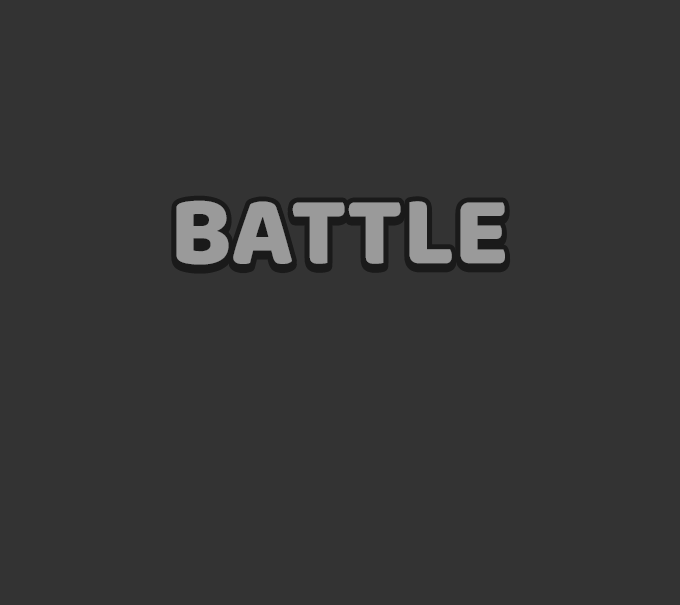
<style>
.page{position:relative;width:680px;height:605px;background:#333333}
.page>*{position:absolute;margin:0}
.t1{font:100px "Baloo2-ExtraBold";color:#9a9a9a}
</style>
<div class="page">
<p class="t1" style="left:176px;top:200px;width:329px;height:65px">BATTLE</p>
</div>
